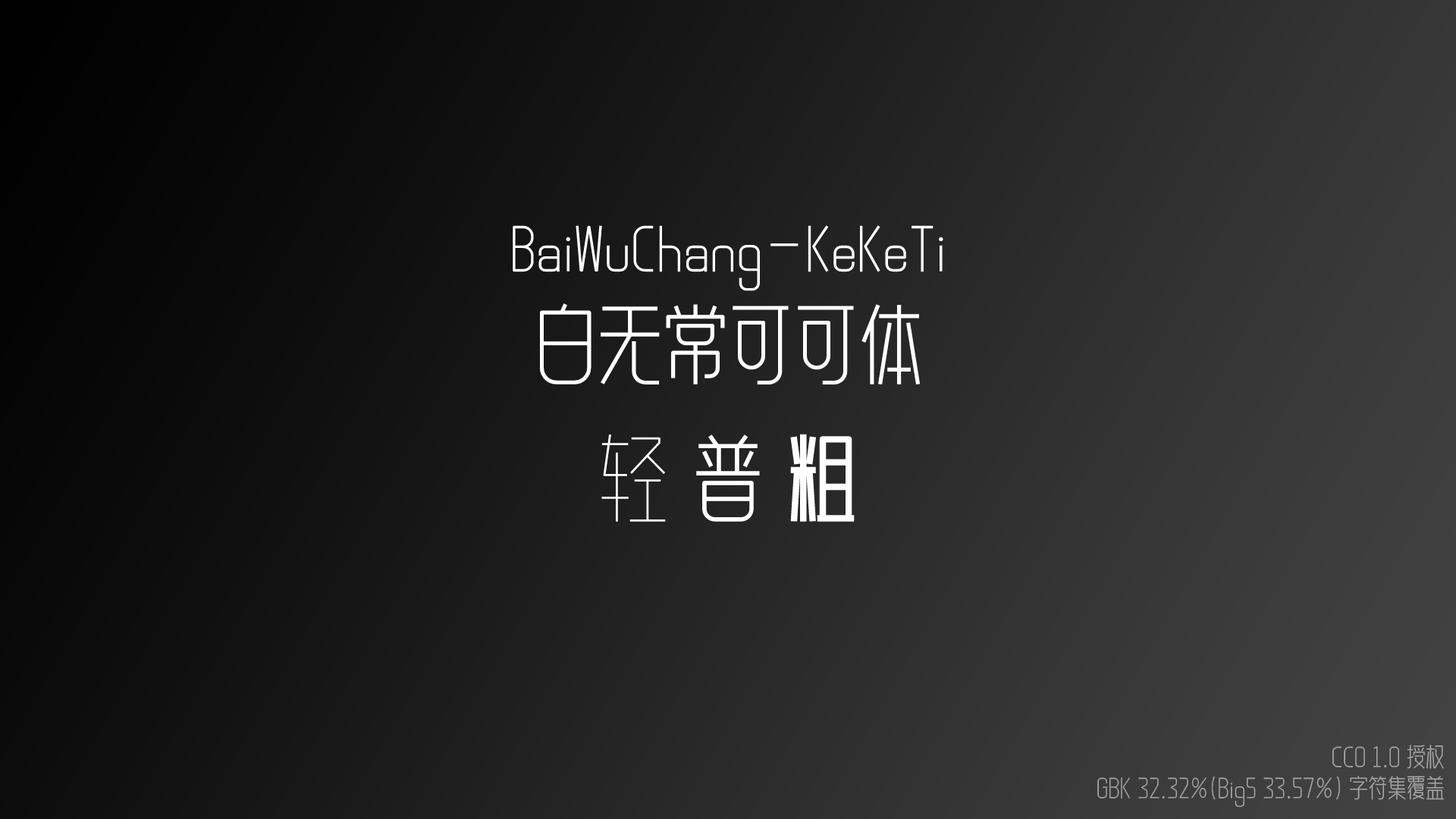
<style>
.page{position:relative;width:1456px;height:819px}
.page>*{position:absolute;margin:0}
.t1{font:57.6px "BWCKKT-Regular";color:#ffffff}
.t2{font:88px "BWCKKT-Regular";color:#ffffff}
.t3{font:95.5px "BWCKKT-Light";color:#ffffff}
.t4{font:95.5px "BWCKKT-Regular";color:#ffffff}
.t5{font:95.5px "BWCKKT-Bold";color:#ffffff}
.t6{font:25.8px "BWCKKT-Regular";color:#a8a8a8}
</style>
<div class="page">
<p class="t1" style="left:513px;top:225px;width:430px;height:160px;text-align:center">BaiWuChang-KeKeTi<br><span class="t2">白无常可可体</span></p>
<p class="t3" style="left:601px;top:434px;width:254px;height:88px">轻 <span class="t4">普 </span><span class="t5">粗</span></p>
<p class="t6" style="left:1097px;top:745px;width:347px;height:62px;text-align:right">CC0 1.0 授权<br> GBK 32.32%(Big5 33.57%) 字符集覆盖</p>
</div>
